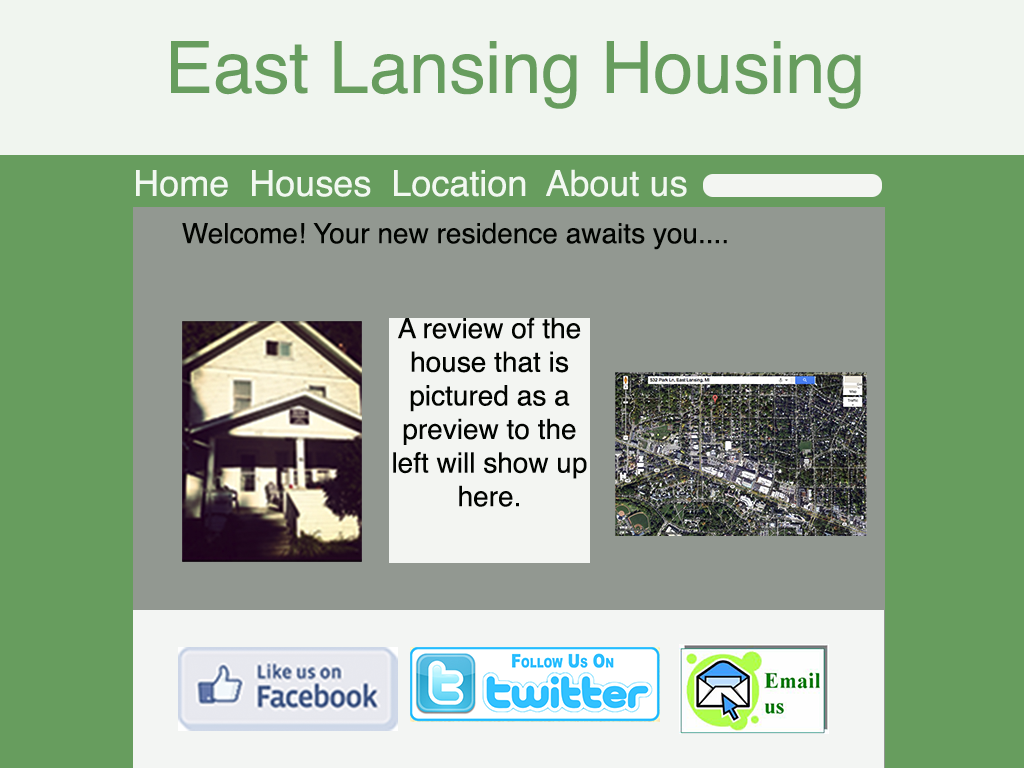
<style>
.page{position:relative;width:1024px;height:768px;background:#679d5e}
.page>*{position:absolute;margin:0}
.t1{font:72px "Helvetica";color:#679d5e}
.t2{font:36px "Helvetica";color:#f2f8f1}
.t3{font:28px "Helvetica";color:#010400}
</style>
<div class="page">
<p class="t1" style="left:171px;top:41px;width:690px;height:68px">East Lansing Housing</p>
<p class="t2" style="left:136px;top:169px;width:551px;height:28px">Home  Houses  Location  About us</p>
<p class="t3" style="left:182px;top:222px;width:545px;height:28px">Welcome! Your new residence awaits you....</p>
<p class="t3" style="left:393px;top:317px;width:194px;height:190px;text-align:center">A review of the house that is pictured as a preview to the left will show up here.</p>
</div>
